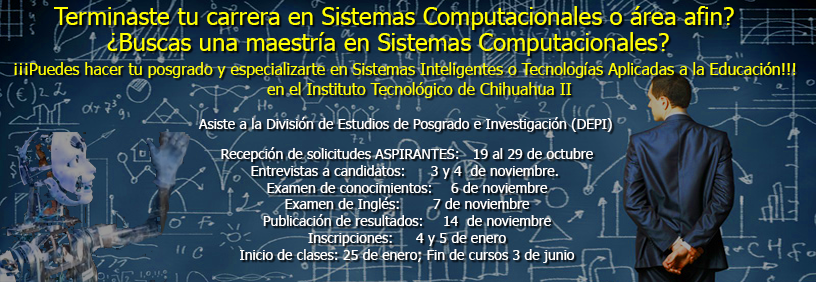
<style>
.page{position:relative;width:816px;height:282px}
.page>*{position:absolute;margin:0}
.t1{font:24px "Tahoma";color:#ffff00}
.t2{font:16px "Tahoma";color:#ffff00}
.t3{font:14px "Tahoma";color:#ffffff}
</style>
<div class="page">
<p class="t1" style="left:54px;top:6px;width:680px;height:24px">Terminaste tu carrera en Sistemas Computacionales o área afin?</p>
<p class="t1" style="left:107px;top:32px;width:562px;height:24px">¿Buscas una maestría en Sistemas Computacionales?</p>
<p class="t2" style="left:14px;top:62px;width:782px;height:16px">¡¡¡Puedes hacer tu posgrado y especializarte en Sistemas Inteligentes o Tecnologías Aplicadas a la Educación!!!</p>
<p class="t2" style="left:267px;top:82px;width:305px;height:16px">en el Instituto Tecnológico de Chihuahua II</p>
<p class="t3" style="left:198px;top:117px;width:414px;height:15px">Asiste a la División de Estudios de Posgrado e Investigación (DEPI)</p>
<p class="t3" style="left:221px;top:147px;width:372px;height:116px;text-align:center">Recepción de solicitudes ASPIRANTES:  19 al 29 de octubre<br>Entrevistas a candidatos:  3 y 4  de noviembre. <br>Examen de conocimientos:  6 de noviembre<br>Examen de Inglés:  7 de noviembre<br>Publicación de resultados: 14  de noviembre<br>Inscripciones: 4 y 5 de enero<br>Inicio de clases: 25 de enero; Fin de cursos 3 de junio</p>
</div>
